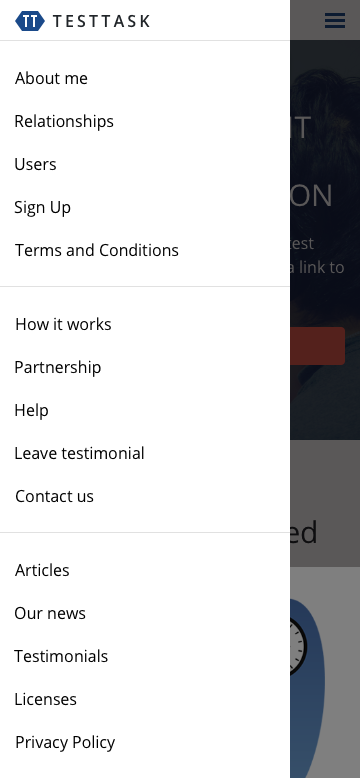
<style>
.page{position:relative;width:360px;height:778px;background:#ffffff}
.page>*{position:absolute;margin:0}
.t1{font:16px "OpenSans-Semibold";letter-spacing:0.2em;color:#212529;text-transform:uppercase}
.t2{font:16px "OpenSans";color:#000000}
</style>
<div class="page">
<p class="t1" style="left:52px;top:14px;width:98px;height:14px">testtask</p>
<p class="t2" style="left:15px;top:71px;width:73px;height:14px">About me</p>
<p class="t2" style="left:15px;top:114px;width:99px;height:17px">Relationships</p>
<p class="t2" style="left:15px;top:158px;width:41px;height:13px">Users</p>
<p class="t2" style="left:14px;top:200px;width:57px;height:17px">Sign Up</p>
<p class="t2" style="left:15px;top:243px;width:164px;height:14px">Terms and Conditions</p>
<p class="t2" style="left:16px;top:317px;width:95px;height:14px">How it works</p>
<p class="t2" style="left:15px;top:360px;width:86px;height:17px">Partnership</p>
<p class="t2" style="left:15px;top:403px;width:33px;height:17px">Help</p>
<p class="t2" style="left:15px;top:446px;width:129px;height:14px">Leave testimonial</p>
<p class="t2" style="left:16px;top:489px;width:78px;height:14px">Contact us</p>
<p class="t2" style="left:15px;top:563px;width:54px;height:14px">Articles</p>
<p class="t2" style="left:15px;top:606px;width:71px;height:14px">Our news</p>
<p class="t2" style="left:14px;top:649px;width:94px;height:14px">Testimonials</p>
<p class="t2" style="left:15px;top:692px;width:62px;height:14px">Licenses</p>
<p class="t2" style="left:16px;top:735px;width:99px;height:17px">Privacy Policy</p>
</div>
